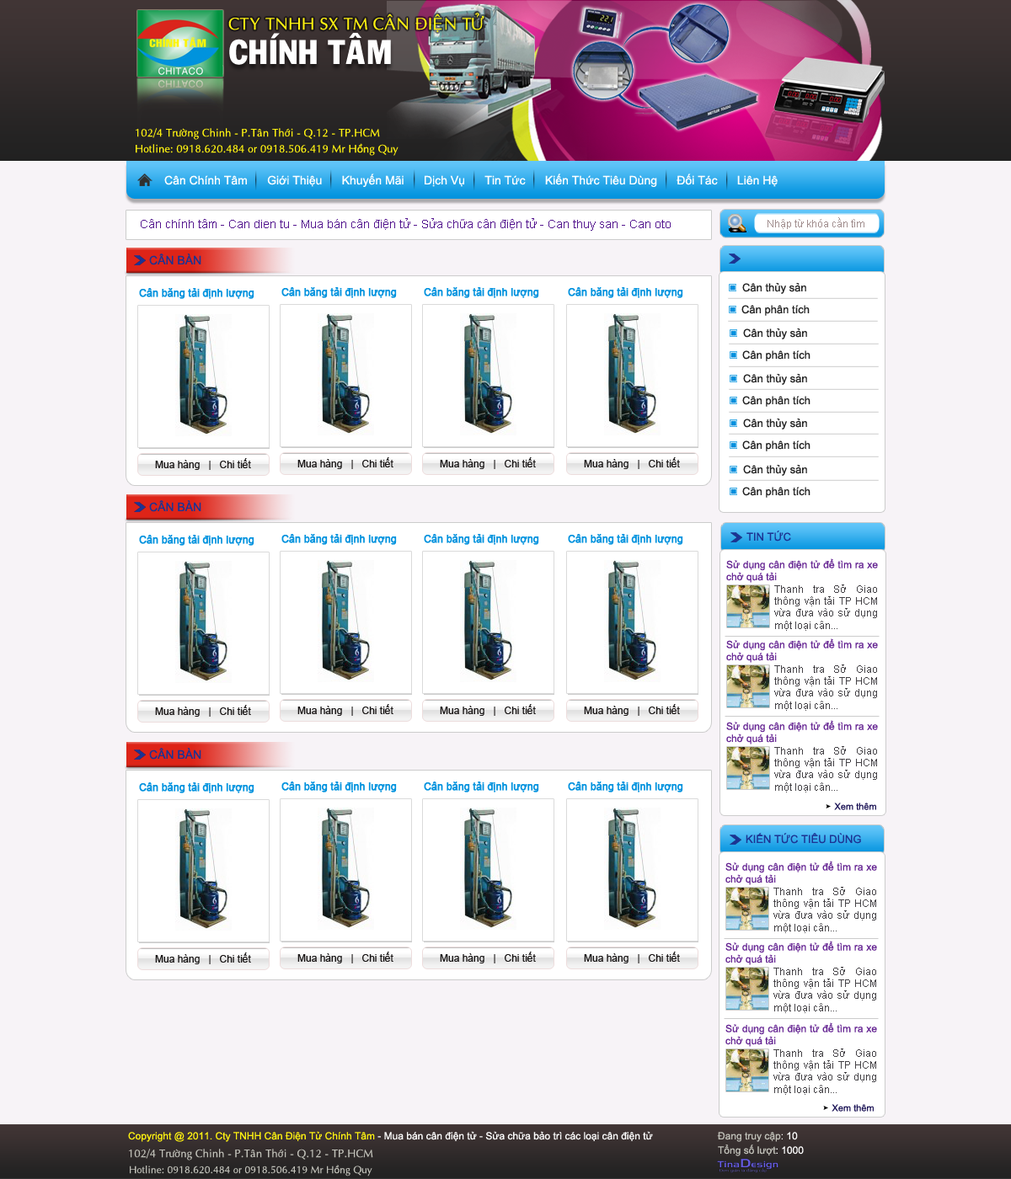
<style>
.page{position:relative;width:1011px;height:1179px;background:#f7f3f7}
.page>*{position:absolute;margin:0}
.t1{font:16.8px "VNI-Aptima";color:#fff310}
.t2{font:33.7px "VNI-Franko";color:#ffffff}
.t3{font:11px "VNI-Aptima";color:#fff310}
.t4{font:11px "MyriadPro-Regular";color:#fff310}
.t5{font:11.8px "ArialMT";color:#ffffff}
.t6{font:11.8px "ArialMT";color:#53158e}
.t7{font:10.1px "ArialMT";color:#a18e8e}
.t8{font:11.8px "ArialMT";color:#1c3393}
.t9{font:10.1px "ArialMT";color:#0092de;font-weight:bold}
.t10{font:11px "ArialMT";color:#212121}
.t11{font:10.1px "ArialMT";color:#171414}
.t12{font:11px "ArialMT";color:#1c3393}
.t13{font:10.1px "ArialMT";color:#662693}
.t14{font:10.1px "ArialMT";color:#444246}
.t15{font:9.3px "ArialMT";color:#1c1456}
.t16{font:10.1px "ArialMT";color:#ffffff}
.t17{font:10.1px "ArialMT";color:#fff310}
.t18{font:10.1px "ArialMT";color:#c0c0b8}
.t19{font:11px "VNI-Aptima";color:#c0c0b8}
.t20{font:10.1px "VNI-Aptima";color:#c0c0b8}
.t21{font:10.1px "MyriadPro-Regular";color:#c0c0b8}
</style>
<div class="page">
<p class="t1" style="left:228px;top:13px;width:256px;height:20px">CTY TNHH SX TM CAÂN ÑIEÄN TÖÛ</p>
<p class="t2" style="left:229px;top:33px;width:162px;height:32px">CHÍNH TAÂM</p>
<p class="t3" style="left:136px;top:128px;width:244px;height:12px">102/4 Tröôøng Chinh - P.Taân Thôùi - Q.12 - TP.HCM</p>
<p class="t3" style="left:136px;top:143px;width:262px;height:13px">Hotline: 0918.620.484 or 0918.506.419 Mr H<span class="t4">ồ</span>ng Quy</p>
<p class="t5" style="left:164px;top:174px;width:614px;height:13px">Cân Chính Tâm      Giới Thiệu      Khuyến Mãi      Dịch Vụ      Tin Tức      Kiến Thức Tiêu Dùng      Đối Tác      Liên Hệ</p>
<p class="t6" style="left:141px;top:218px;width:530px;height:13px">Cân chính tâm - Can dien tu - Mua bán cân điện tử - Sửa chữa cân điện tử - Can thuy san - Can oto</p>
<p class="t7" style="left:768px;top:217px;width:96px;height:12px">Nhập từ khóa cần tìm</p>
<p class="t8" style="left:149px;top:254px;width:52px;height:11px">CÂN BÀN</p>
<p class="t9" style="left:139px;top:288px;width:115px;height:11px">Cân băng tải định lượng</p>
<p class="t9" style="left:281px;top:287px;width:116px;height:11px">Cân băng tải định lượng</p>
<p class="t9" style="left:424px;top:287px;width:115px;height:11px">Cân băng tải định lượng</p>
<p class="t9" style="left:568px;top:287px;width:115px;height:11px">Cân băng tải định lượng</p>
<p class="t10" style="left:742px;top:283px;width:64px;height:11px">Cân thủy sản</p>
<p class="t10" style="left:741px;top:305px;width:69px;height:11px">Cân phân tích</p>
<p class="t10" style="left:743px;top:329px;width:64px;height:11px">Cân thủy sản</p>
<p class="t10" style="left:742px;top:350px;width:68px;height:11px">Cân phân tích</p>
<p class="t10" style="left:743px;top:374px;width:64px;height:11px">Cân thủy sản</p>
<p class="t10" style="left:742px;top:396px;width:68px;height:11px">Cân phân tích</p>
<p class="t10" style="left:743px;top:419px;width:64px;height:11px">Cân thủy sản</p>
<p class="t10" style="left:742px;top:441px;width:68px;height:11px">Cân phân tích</p>
<p class="t11" style="left:155px;top:458px;width:96px;height:12px">Mua hàng   |   Chi tiết</p>
<p class="t11" style="left:297px;top:457px;width:96px;height:12px">Mua hàng   |   Chi tiết</p>
<p class="t11" style="left:440px;top:457px;width:96px;height:12px">Mua hàng   |   Chi tiết</p>
<p class="t11" style="left:584px;top:457px;width:96px;height:12px">Mua hàng   |   Chi tiết</p>
<p class="t10" style="left:743px;top:465px;width:64px;height:11px">Cân thủy sản</p>
<p class="t10" style="left:742px;top:487px;width:68px;height:11px">Cân phân tích</p>
<p class="t8" style="left:149px;top:500px;width:52px;height:12px">CÂN BÀN</p>
<p class="t12" style="left:746px;top:531px;width:45px;height:11px">TIN TỨC</p>
<p class="t9" style="left:139px;top:535px;width:115px;height:11px">Cân băng tải định lượng</p>
<p class="t9" style="left:281px;top:534px;width:116px;height:11px">Cân băng tải định lượng</p>
<p class="t9" style="left:424px;top:534px;width:115px;height:11px">Cân băng tải định lượng</p>
<p class="t9" style="left:568px;top:534px;width:115px;height:11px">Cân băng tải định lượng</p>
<p class="t13" style="left:726px;top:559px;width:152px;height:24px;text-align:justify">Sử dụng cân điện tử để tìm ra xe chở quá tải</p>
<p class="t14" style="left:774px;top:585px;width:103px;height:46px;text-align:justify">Thanh tra Sở Giao thông vận tải TP HCM vừa đưa vào sử dụng một loại cân...</p>
<p class="t13" style="left:726px;top:639px;width:152px;height:24px;text-align:justify">Sử dụng cân điện tử để tìm ra xe chở quá tải</p>
<p class="t14" style="left:774px;top:665px;width:103px;height:46px;text-align:justify">Thanh tra Sở Giao thông vận tải TP HCM vừa đưa vào sử dụng một loại cân...</p>
<p class="t11" style="left:155px;top:705px;width:96px;height:12px">Mua hàng   |   Chi tiết</p>
<p class="t11" style="left:297px;top:704px;width:96px;height:12px">Mua hàng   |   Chi tiết</p>
<p class="t11" style="left:440px;top:704px;width:96px;height:12px">Mua hàng   |   Chi tiết</p>
<p class="t11" style="left:584px;top:704px;width:96px;height:12px">Mua hàng   |   Chi tiết</p>
<p class="t13" style="left:726px;top:720px;width:152px;height:25px;text-align:justify">Sử dụng cân điện tử để tìm ra xe chở quá tải</p>
<p class="t8" style="left:149px;top:748px;width:52px;height:12px">CÂN BÀN</p>
<p class="t14" style="left:774px;top:746px;width:103px;height:47px;text-align:justify">Thanh tra Sở Giao thông vận tải TP HCM vừa đưa vào sử dụng một loại cân...</p>
<p class="t9" style="left:139px;top:783px;width:115px;height:11px">Cân băng tải định lượng</p>
<p class="t9" style="left:281px;top:782px;width:116px;height:11px">Cân băng tải định lượng</p>
<p class="t9" style="left:424px;top:782px;width:115px;height:11px">Cân băng tải định lượng</p>
<p class="t9" style="left:568px;top:782px;width:115px;height:11px">Cân băng tải định lượng</p>
<p class="t15" style="left:834px;top:803px;width:42px;height:7px">Xem thêm</p>
<p class="t12" style="left:746px;top:833px;width:115px;height:11px">KIẾN TỨC TIÊU DÙNG</p>
<p class="t13" style="left:725px;top:861px;width:152px;height:24px;text-align:justify">Sử dụng cân điện tử để tìm ra xe chở quá tải</p>
<p class="t14" style="left:773px;top:887px;width:103px;height:46px;text-align:justify">Thanh tra Sở Giao thông vận tải TP HCM vừa đưa vào sử dụng một loại cân...</p>
<p class="t13" style="left:725px;top:941px;width:152px;height:24px;text-align:justify">Sử dụng cân điện tử để tìm ra xe chở quá tải</p>
<p class="t11" style="left:155px;top:953px;width:96px;height:12px">Mua hàng   |   Chi tiết</p>
<p class="t11" style="left:297px;top:952px;width:96px;height:12px">Mua hàng   |   Chi tiết</p>
<p class="t11" style="left:440px;top:952px;width:96px;height:12px">Mua hàng   |   Chi tiết</p>
<p class="t11" style="left:584px;top:952px;width:96px;height:12px">Mua hàng   |   Chi tiết</p>
<p class="t14" style="left:773px;top:967px;width:103px;height:47px;text-align:justify">Thanh tra Sở Giao thông vận tải TP HCM vừa đưa vào sử dụng một loại cân...</p>
<p class="t13" style="left:725px;top:1023px;width:152px;height:24px;text-align:justify">Sử dụng cân điện tử để tìm ra xe chở quá tải</p>
<p class="t14" style="left:773px;top:1049px;width:103px;height:46px;text-align:justify">Thanh tra Sở Giao thông vận tải TP HCM vừa đưa vào sử dụng một loại cân...</p>
<p class="t15" style="left:832px;top:1104px;width:42px;height:8px">Xem thêm</p>
<p class="t16" style="left:128px;top:1131px;width:525px;height:11px"><span class="t17">Copyright @ 2011. Cty TNHH Cân Điện Tử Chính Tâm</span> - Mua bán cân điện tử - Sửa chữa bảo trì các loại cân điện tử</p>
<p class="t18" style="left:717px;top:1132px;width:81px;height:10px">Đang truy cập<span class="t16">: 10</span></p>
<p class="t18" style="left:718px;top:1145px;width:86px;height:12px">Tổng số lượt<span class="t16">: 1000</span></p>
<p class="t19" style="left:129px;top:1149px;width:244px;height:12px">102/4 Tröôøng Chinh - P.Taân Thôùi - Q.12 - TP.HCM</p>
<p class="t20" style="left:130px;top:1165px;width:242px;height:12px">Hotline: 0918.620.484 or 0918.506.419 Mr H<span class="t21">ồ</span>ng Quy</p>
</div>
